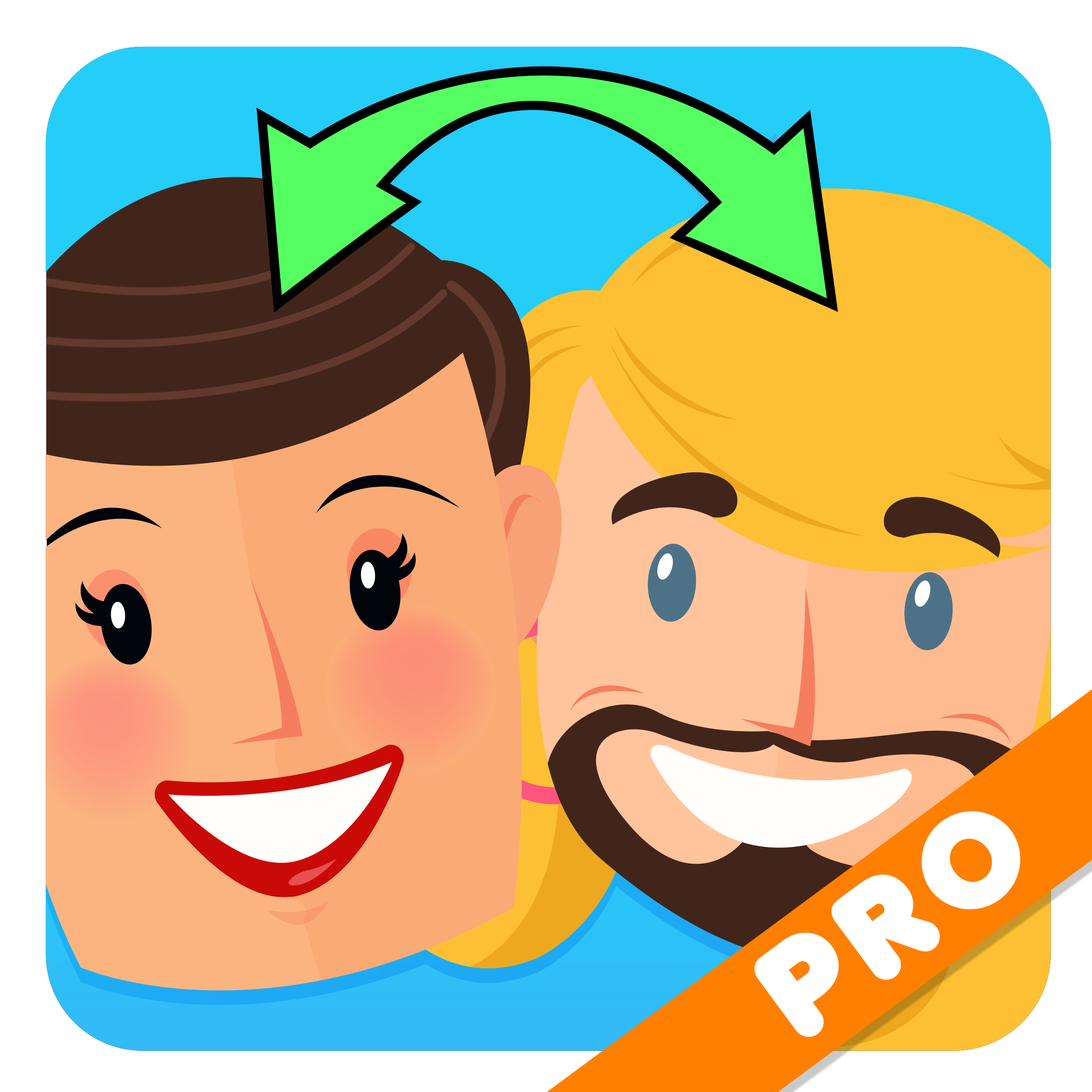
<style>
.page{position:relative;width:1092px;height:1092px}
.page>*{position:absolute;margin:0}
.t1{font:130.1px "AnjaElianeaccent-Nornal";letter-spacing:0.1em;color:#ffffff}
</style>
<div class="page">
<p class="t1" style="left:754px;top:811px;width:266px;height:226px;rotate:-36deg">PRO</p>
</div>
